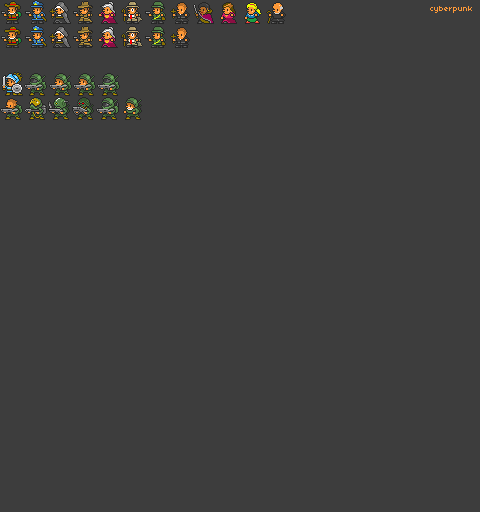
<style>
.page{position:relative;width:480px;height:512px;background:#3d3d3d}
.page>*{position:absolute;margin:0}
.t1{font:8px "04b03";color:#fc9838}
</style>
<div class="page">
<p class="t1" style="left:430px;top:6px;width:42px;height:7px">cyberpunk</p>
</div>
